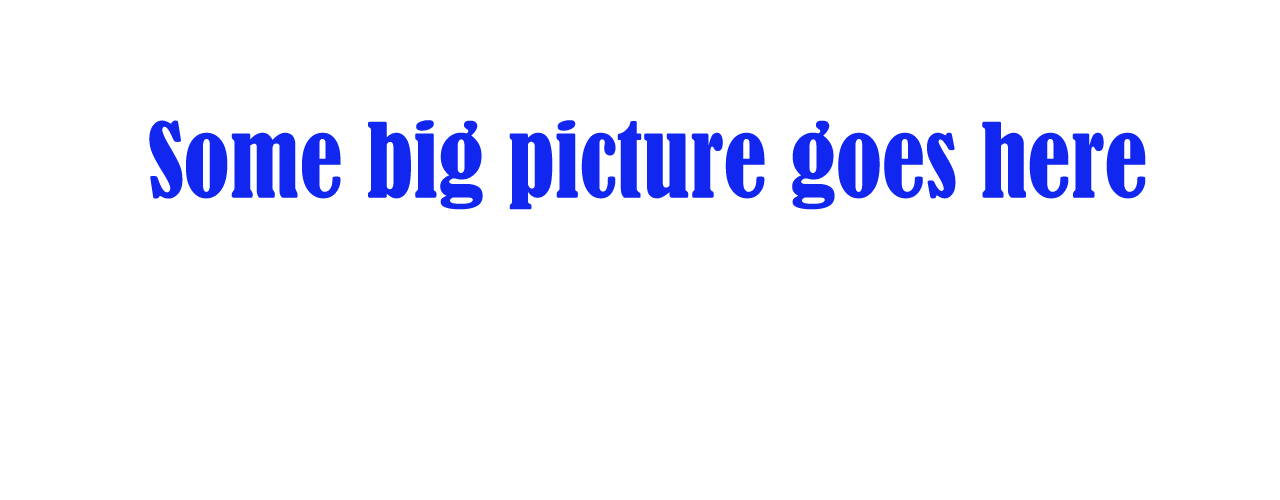
<style>
.page{position:relative;width:1280px;height:500px;background:#ffffff}
.page>*{position:absolute;margin:0}
.t1{font:96px "BernardMT-Condensed";color:#1126ee}
</style>
<div class="page">
<p class="t1" style="left:149px;top:120px;width:997px;height:90px">Some big picture goes here</p>
</div>
